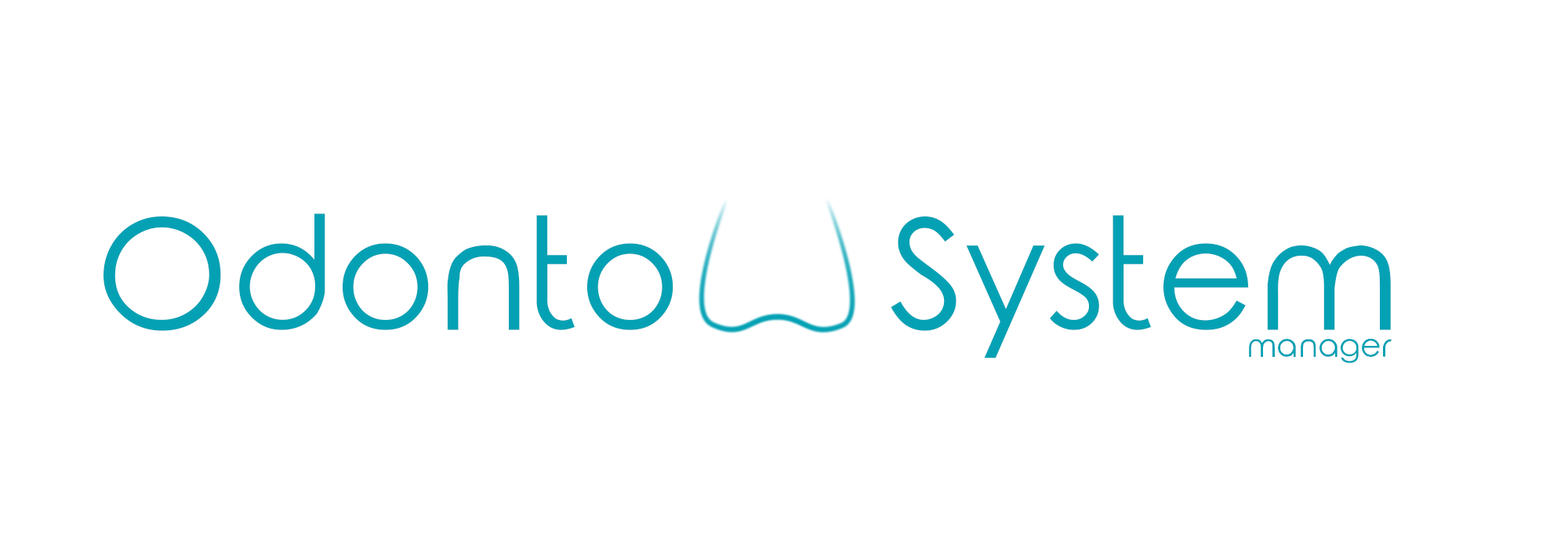
<style>
.page{position:relative;width:1568px;height:549px;background:#ffffff}
.page>*{position:absolute;margin:0}
.t1{font:153.3px "RoundedElegance-Regular";color:#04a1b4}
.t2{font:31.8px "RoundedElegance-Regular";color:#04a1b4}
</style>
<div class="page">
<p class="t1" style="left:103px;top:213px;width:1288px;height:145px">Odonto     System</p>
<p class="t2" style="left:1249px;top:339px;width:143px;height:24px">manager</p>
</div>
